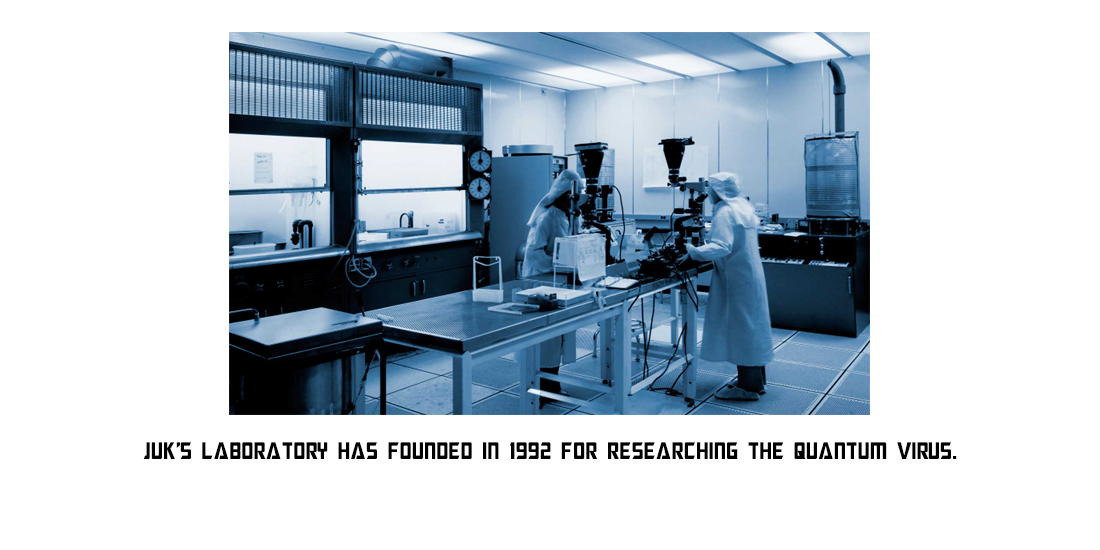
<style>
.page{position:relative;width:1100px;height:550px;background:#ffffff}
.page>*{position:absolute;margin:0}
.t1{font:24px "MegatronCondensed";color:#000000}
</style>
<div class="page">
<p class="t1" style="left:143px;top:442px;width:814px;height:17px">juk’s laboratory has founded in 1992 for researching the quantum Virus.</p>
</div>
